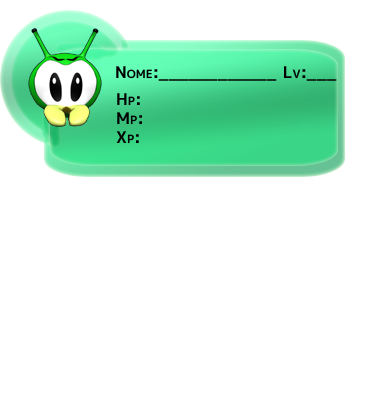
<style>
.page{position:relative;width:388px;height:406px;background:#ffffff}
.page>*{position:absolute;margin:0}
.t1{font:16px "mplus-1p-bold";color:#010101;font-variant:small-caps}
</style>
<div class="page">
<p class="t1" style="left:116px;top:66px;width:221px;height:15px">Nome:____________ Lv:___</p>
<p class="t1" style="left:116px;top:93px;width:26px;height:51px">Hp:<br>Mp:<br>Xp:</p>
</div>
